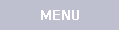
<style>
.page{position:relative;width:119px;height:30px;background:#bec0cf}
.page>*{position:absolute;margin:0}
.t1{font:12px "Gulim";color:#ffffff;font-weight:bold}
</style>
<div class="page">
<p class="t1" style="left:41px;top:10px;width:38px;height:10px">MENU</p>
</div>
